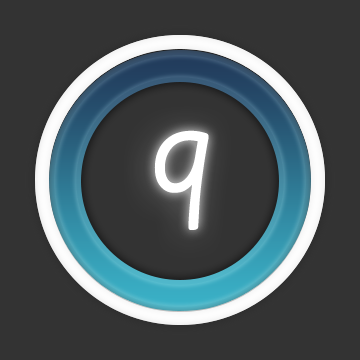
<style>
.page{position:relative;width:360px;height:360px;background:#333333}
.page>*{position:absolute;margin:0}
.t1{font:160px "Farsan-Regular";color:#ffffff}
</style>
<div class="page">
<p class="t1" style="left:154px;top:130px;width:55px;height:100px">9</p>
</div>
